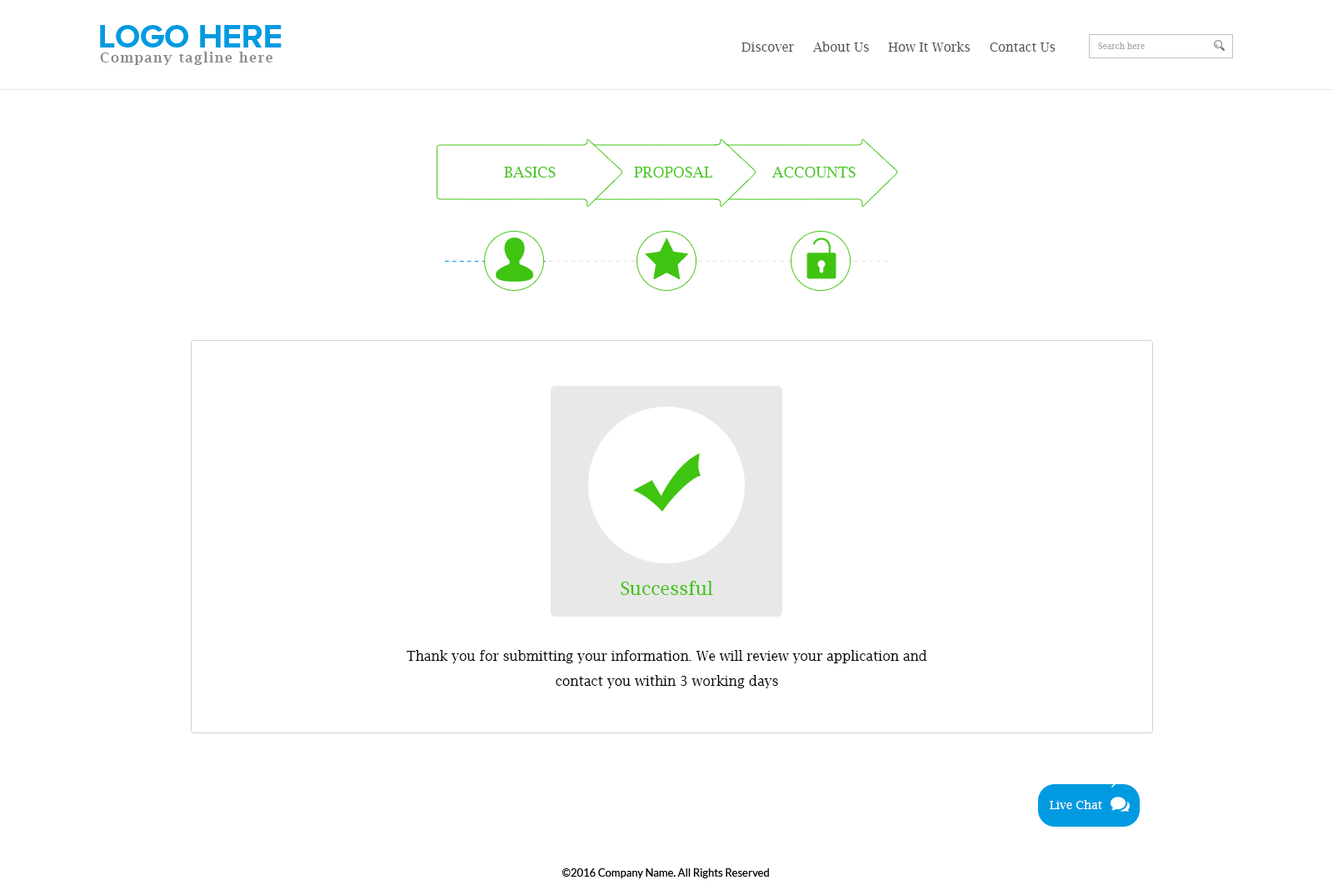
<style>
.page{position:relative;width:1333px;height:895px;background:#ffffff}
.page>*{position:absolute;margin:0}
.t1{font:33.3px "ProximaNovaA-Bold";color:#009ae1;text-transform:uppercase}
.t2{font:12.5px "LucidaBright";color:#585858}
.t3{font:13.3px "LucidaBright-Demi";letter-spacing:0.1em;color:#898989}
.t4{font:8.3px "LucidaBright";color:#afafaf}
.t5{font:15px "LucidaBright";color:#40c412}
.t6{font:15px "LucidaBright";color:#40c412;text-transform:uppercase}
.t7{font:17.5px "LucidaBright";letter-spacing:0.1em}
.t8{font:18.3px "LucidaBright";color:#40c412}
.t9{font:13.3px/25px "LucidaBright";color:#000000}
.t10{font:11.7px "LucidaBright";color:#ffffff}
.t11{font:10.8px "Lato-Regular";color:#000000}
</style>
<div class="page">
<p class="t1" style="left:100px;top:25px;width:182px;height:22px">Logo HERE</p>
<p class="t2" style="left:741px;top:42px;width:314px;height:10px">Discover     About Us     How It Works     Contact Us</p>
<p class="t3" style="left:100px;top:52px;width:172px;height:13px">Company tagline here</p>
<p class="t4" style="left:1098px;top:42px;width:47px;height:7px">Search here</p>
<p class="t5" style="left:504px;top:167px;width:52px;height:10px">BASICS</p>
<p class="t5" style="left:634px;top:167px;width:78px;height:10px">PROPOSAL</p>
<p class="t6" style="left:771px;top:167px;width:85px;height:10px">Accounts</p>
<p class="t7" style="left:444px;top:261px;width:444px;height:1px">------------------------------------------------------------</p>
<p class="t8" style="left:621px;top:581px;width:92px;height:14px">Successful</p>
<p class="t9" style="left:407px;top:650px;width:520px;height:38px;text-align:center">Thank you for submitting your information. We will review your application and contact you within 3 working days</p>
<p class="t10" style="left:1050px;top:800px;width:52px;height:9px">Live Chat</p>
<p class="t11" style="left:561px;top:868px;width:208px;height:10px">©2016 Company Name. All Rights Reserved</p>
</div>
